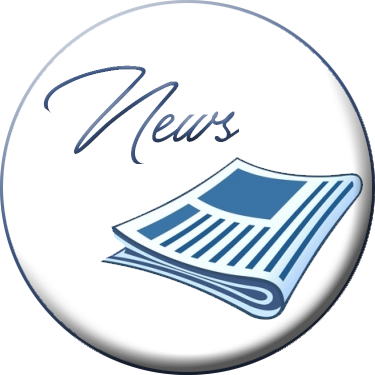
<style>
.page{position:relative;width:375px;height:375px;background:#ffffff}
.page>*{position:absolute;margin:0}
.t1{font:75px "GreatDayPersonalUse"}
</style>
<div class="page">
<p class="t1" style="left:43px;top:65px;width:197px;height:99px">News</p>
</div>
